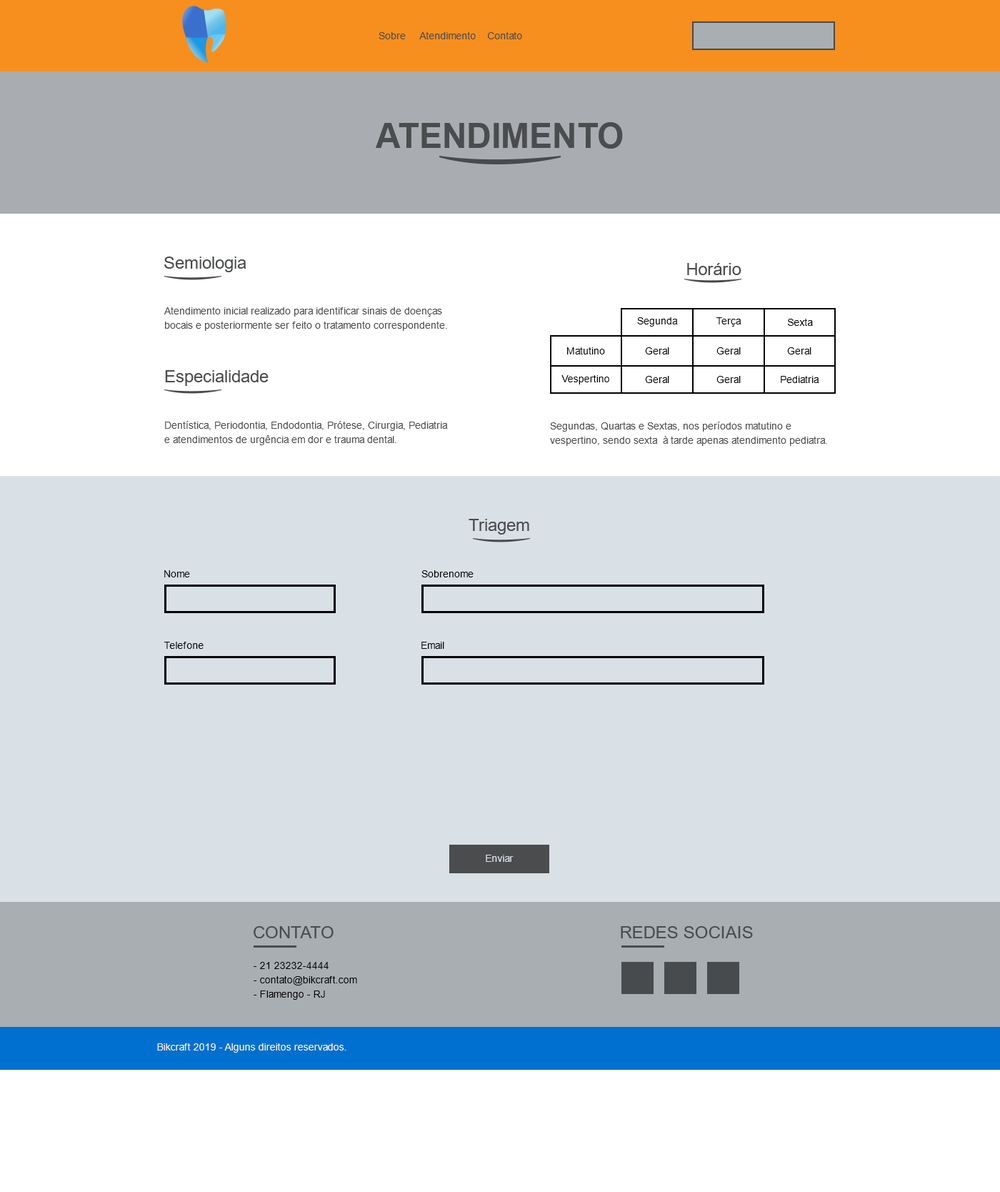
<style>
.page{position:relative;width:1000px;height:1192px;background:#d9e0e6}
.page>*{position:absolute;margin:0}
.t1{font:10px "ArialMT";color:#4a4c4e}
.t2{font:34.3px "Arial-BoldMT";color:#4a4c4e;text-transform:uppercase}
.t3{font:17.2px "ArialMT";color:#4a4c4e}
.t4{font:10px/14.3px "ArialMT";color:#4a4c4e}
.t5{font:10px "ArialMT";color:#000000}
.t6{font:10px "ArialMT";color:#d9e0e6}
.t7{font:10px/14.3px "ArialMT";color:#000000}
.t8{font:10px "ArialMT";color:#f9f0f0}
</style>
<div class="page">
<p class="t1" style="left:379px;top:32px;width:143px;height:7px">Sobre     Atendimento    Contato</p>
<p class="t2" style="left:376px;top:122px;width:247px;height:27px">AtendimentO</p>
<p class="t3" style="left:164px;top:257px;width:83px;height:15px">Semiologia</p>
<p class="t3" style="left:687px;top:263px;width:55px;height:12px">Horário</p>
<p class="t4" style="left:164px;top:307px;width:283px;height:24px">Atendimento inicial realizado para identificar sinais de doenças bocais e posteriormente ser feito o tratamento correspondente.</p>
<p class="t5" style="left:637px;top:317px;width:41px;height:10px">Segunda</p>
<p class="t5" style="left:717px;top:317px;width:25px;height:10px">Terça</p>
<p class="t5" style="left:788px;top:319px;width:25px;height:7px">Sexta</p>
<p class="t5" style="left:567px;top:347px;width:38px;height:7px">Matutino</p>
<p class="t5" style="left:645px;top:347px;width:25px;height:7px">Geral</p>
<p class="t5" style="left:717px;top:347px;width:24px;height:7px">Geral</p>
<p class="t5" style="left:787px;top:347px;width:25px;height:7px">Geral</p>
<p class="t3" style="left:165px;top:370px;width:104px;height:16px">Especialidade</p>
<p class="t5" style="left:562px;top:375px;width:48px;height:9px">Vespertino</p>
<p class="t5" style="left:645px;top:376px;width:25px;height:7px">Geral</p>
<p class="t5" style="left:717px;top:376px;width:24px;height:7px">Geral</p>
<p class="t5" style="left:781px;top:376px;width:39px;height:7px">Pediatria</p>
<p class="t4" style="left:164px;top:421px;width:284px;height:24px">Dentística, Periodontia, Endodontia, Prótese, Cirurgia, Pediatria e atendimentos de urgência em dor e trauma dental.</p>
<p class="t4" style="left:550px;top:422px;width:277px;height:24px">Segundas, Quartas e Sextas, nos períodos matutino e vespertino, sendo sexta  à tarde apenas atendimento pediatra.</p>
<p class="t3" style="left:469px;top:519px;width:61px;height:16px">Triagem</p>
<p class="t5" style="left:164px;top:570px;width:26px;height:7px">Nome</p>
<p class="t5" style="left:422px;top:570px;width:52px;height:7px">Sobrenome</p>
<p class="t5" style="left:164px;top:642px;width:40px;height:7px">Telefone</p>
<p class="t5" style="left:422px;top:642px;width:22px;height:7px">Email</p>
<p class="t6" style="left:486px;top:855px;width:28px;height:7px">Enviar</p>
<p class="t3" style="left:254px;top:926px;width:80px;height:12px">CONTATO</p>
<p class="t3" style="left:621px;top:926px;width:132px;height:12px">REDES SOCIAIS</p>
<p class="t7" style="left:254px;top:962px;width:103px;height:38px">- 21 23232-4444<br>- contato@bikcraft.com<br>- Flamengo - RJ</p>
<p class="t8" style="left:157px;top:1043px;width:190px;height:10px">Bikcraft 2019 - Alguns direitos reservados.</p>
</div>
